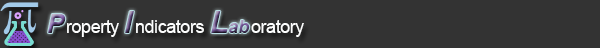
<style>
.page{position:relative;width:600px;height:48px;background:#333333}
.page>*{position:absolute;margin:0}
.t1{font:30px "Arial-BoldItalicMT";letter-spacing:0.1em}
.t2{font:18px "ArialMT";letter-spacing:-0.025em;color:#fdfefe}
</style>
<div class="page">
<p class="t1" style="left:125px;top:11px;width:9px;height:22px">I</p>
<p class="t2" style="left:67px;top:20px;width:52px;height:17px">roperty</p>
<p class="t2" style="left:136px;top:20px;width:68px;height:13px">ndicators</p>
<p class="t2" style="left:251px;top:20px;width:53px;height:17px">oratory</p>
</div>
